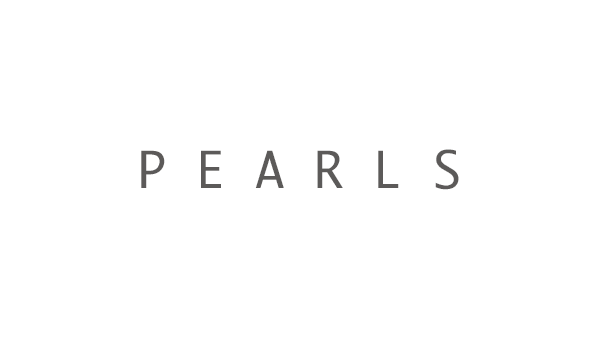
<style>
.page{position:relative;width:600px;height:338px;background:#ffffff}
.page>*{position:absolute;margin:0}
.t1{font:49.3px "Ayuthaya";color:#5c5a59}
</style>
<div class="page">
<p class="t1" style="left:141px;top:149px;width:318px;height:41px">P E A R L S</p>
</div>
